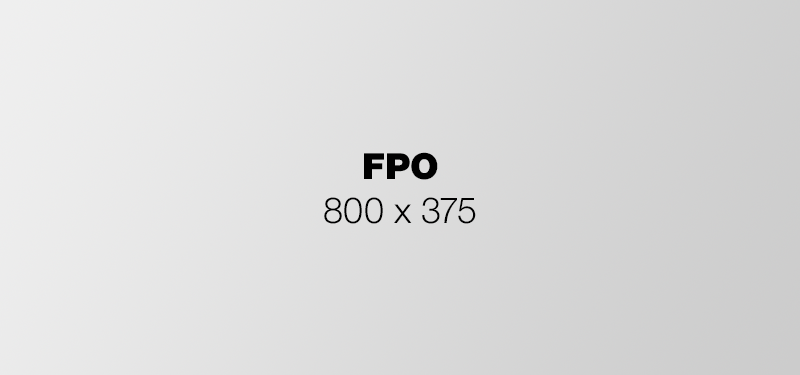
<style>
.page{position:relative;width:800px;height:375px}
.page>*{position:absolute;margin:0}
.t1{font:36px/24px "HelveticaNeueLTPro-Lt";color:#000000}
.t2{font:36px/24px "HelveticaNeueLTPro-Blk";color:#000000}
</style>
<div class="page">
<p class="t1" style="left:324px;top:152px;width:152px;height:72px;text-align:center"><span class="t2">FPO<br></span>800 x 375</p>
</div>
